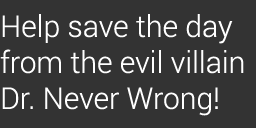
<style>
.page{position:relative;width:256px;height:128px;background:#333333}
.page>*{position:absolute;margin:0}
.t1{font:30px "Roboto-Light";color:#ffffff}
</style>
<div class="page">
<p class="t1" style="left:0px;top:14px;width:244px;height:102px">Help save the day from the evil villain Dr. Never Wrong!</p>
</div>
